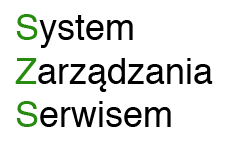
<style>
.page{position:relative;width:250px;height:150px;background:#ffffff}
.page>*{position:absolute;margin:0}
.t1{font:36px "Helvetica";color:#000000}
.t2{font:36px "Helvetica";color:#268b0e}
</style>
<div class="page">
<p class="t1" style="left:15px;top:14px;width:198px;height:113px"><span class="t2">S</span>ystem <br><span class="t2">Z</span>arządzania <br><span class="t2">S</span>erwisem</p>
</div>
